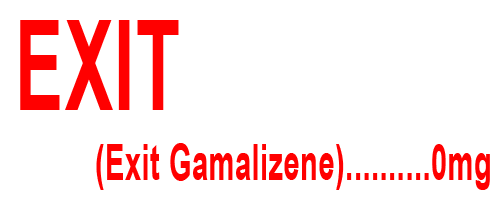
<style>
.page{position:relative;width:500px;height:200px;background:#ffffff}
.page>*{position:absolute;margin:0}
.t1{font:125.8px "Arial-BoldMT";letter-spacing:0.02em;color:#ff0000;scale:0.57 1}
.t2{font:50.3px "Arial-BoldMT";letter-spacing:0.02em;color:#ff0000;scale:0.57 1}
</style>
<div class="page">
<p class="t1" style="left:20px;top:20px;width:159px;height:90px">EXIT</p>
<p class="t2" style="left:96px;top:143px;width:394px;height:47px">(Exit Gamalizene)..........0mg</p>
</div>
